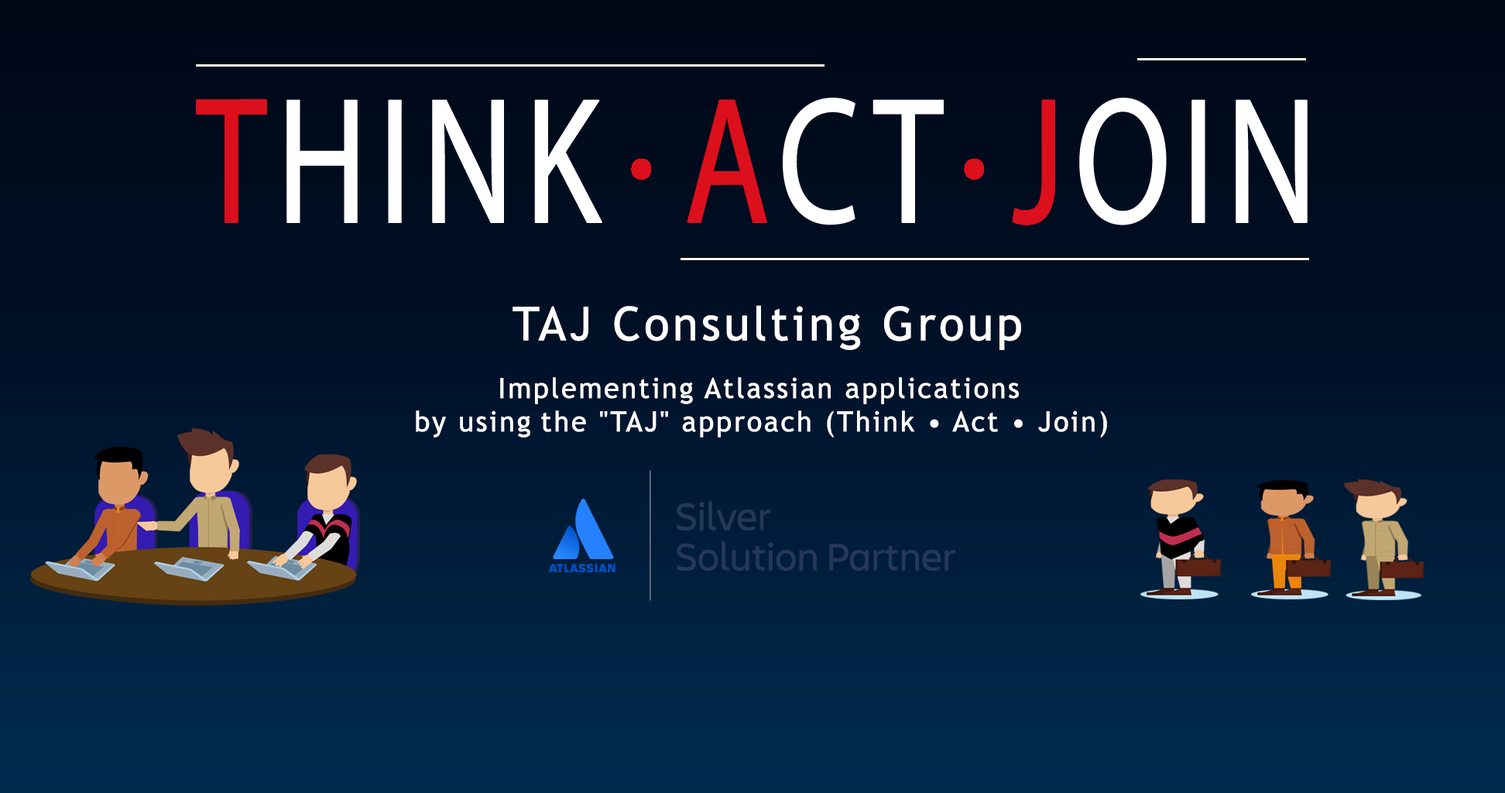
<style>
.page{position:relative;width:1505px;height:793px}
.page>*{position:absolute;margin:0}
.t1{font:46.4px "TrebuchetMS";letter-spacing:0.05em;color:#ffffff;font-weight:bold}
.t2{font:27.9px "TrebuchetMS";letter-spacing:0.05em;color:#ffffff;font-weight:bold}
</style>
<div class="page">
<p class="t1" style="left:512px;top:305px;width:509px;height:45px">TAJ Consulting Group</p>
<p class="t2" style="left:416px;top:377px;width:691px;height:60px">Implementing Atlassian applications<br>by using the "TAJ" approach (Think • Act • Join)</p>
</div>
